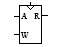
<style>
.page{position:relative;width:60px;height:47px;background:#ffffff}
.page>*{position:absolute;margin:0}
.t1{font:8px "TimesNewRomanPSMT";color:#000000;font-variant:small-caps}
</style>
<div class="page">
<p class="t1" style="left:21px;top:13px;width:7px;height:6px">A</p>
<p class="t1" style="left:34px;top:13px;width:6px;height:6px">R</p>
<p class="t1" style="left:20px;top:32px;width:9px;height:6px">W</p>
</div>
